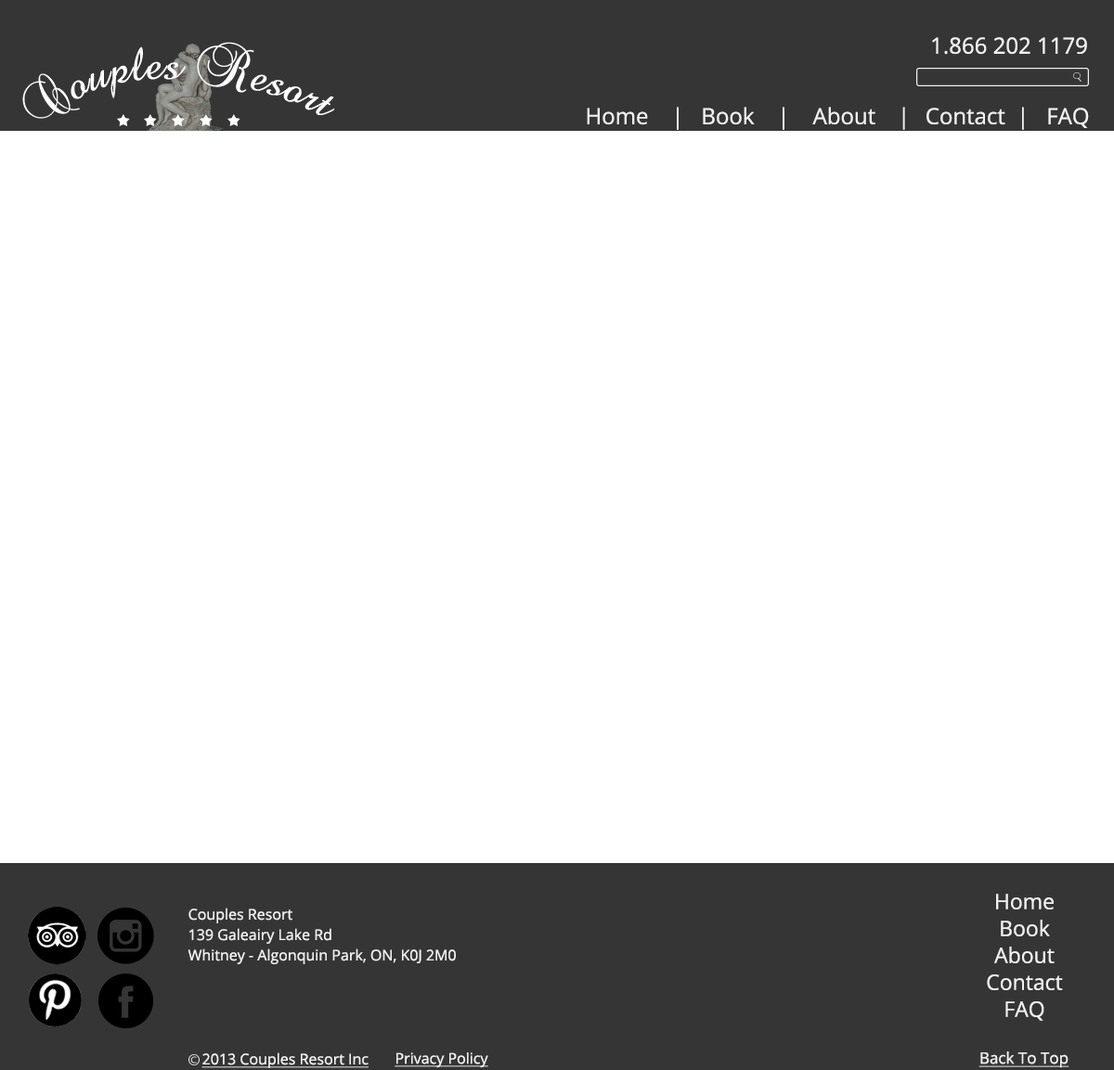
<style>
.page{position:relative;width:1114px;height:1070px;background:#ffffff}
.page>*{position:absolute;margin:0}
.t1{font:22.3px "OpenSans-Regular";color:#f1f1f1}
.t2{font:21.4px/26.9px "OpenSans-Regular";color:#f1f1f1}
.t3{font:14.9px/20.4px "OpenSans-Regular";color:#f1f1f1}
.t4{font:14.9px "OpenSans-Regular";color:#f1f1f1;text-decoration:underline}
.t5{font:15.8px "OpenSans-Regular";color:#f1f1f1;text-decoration:underline}
</style>
<div class="page">
<p class="t1" style="left:932px;top:37px;width:155px;height:18px">1.866 202 1179</p>
<p class="t1" style="left:587px;top:107px;width:502px;height:23px">Home    |   Book    |    About   |  Contact  |   FAQ</p>
<p class="t2" style="left:987px;top:894px;width:76px;height:127px;text-align:center">Home<br>Book<br>About<br>Contact<br>FAQ</p>
<p class="t3" style="left:188px;top:908px;width:268px;height:57px">Couples Resort <br>139 Galeairy Lake Rd<br>Whitney - Algonquin Park, ON, K0J 2M0</p>
<p class="t4" style="left:201px;top:1053px;width:168px;height:16px">2013 Couples Resort Inc</p>
<p class="t4" style="left:395px;top:1053px;width:93px;height:16px">Privacy Policy</p>
<p class="t5" style="left:978px;top:1052px;width:91px;height:17px">Back To Top</p>
</div>
